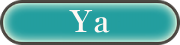
<style>
.page{position:relative;width:180px;height:45px}
.page>*{position:absolute;margin:0}
.t1{font:30px "RyuminPro-ExBold";color:#fff7f3}
</style>
<div class="page">
<p class="t1" style="left:69px;top:10px;width:41px;height:23px">Ya</p>
</div>
